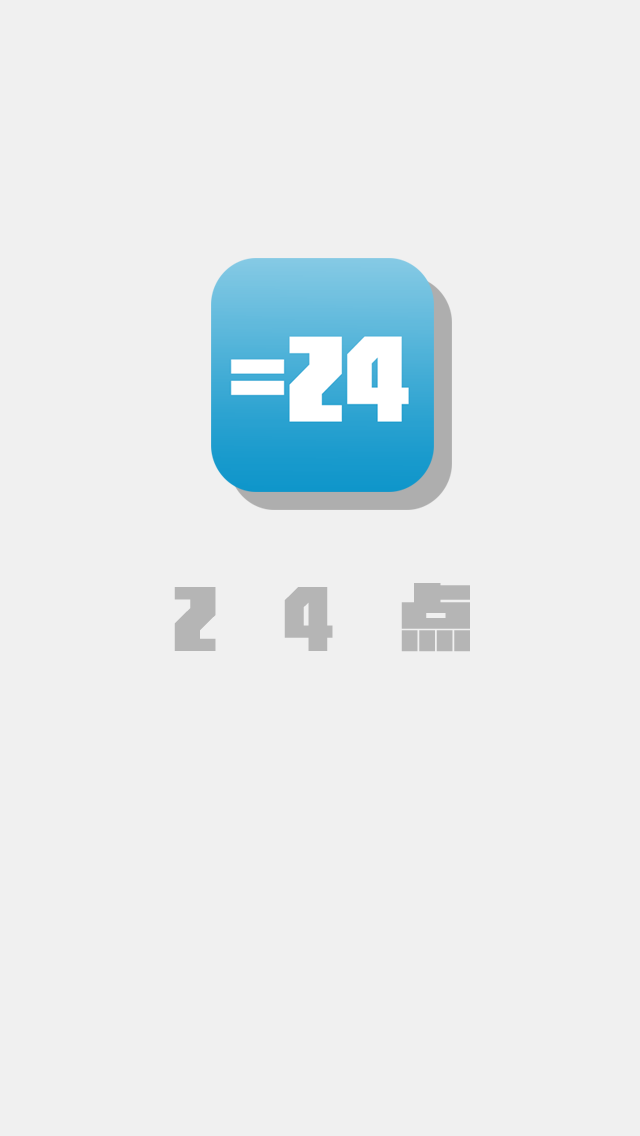
<style>
.page{position:relative;width:640px;height:1136px;background:#f0f0f0}
.page>*{position:absolute;margin:0}
.t1{font:72.1px "MFJinHei_Noncommercial-Regular";color:#b5b5b5}
</style>
<div class="page">
<p class="t1" style="left:174px;top:583px;width:296px;height:69px">2    4    点</p>
</div>
